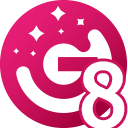
<style>
.page{position:relative;width:128px;height:128px;background:#ffffff}
.page>*{position:absolute;margin:0}
.t1{font:85.4px "Tahoma";color:#ffffff;font-weight:bold}
</style>
<div class="page">
<p class="t1" style="left:81px;top:61px;width:44px;height:68px">8</p>
</div>
